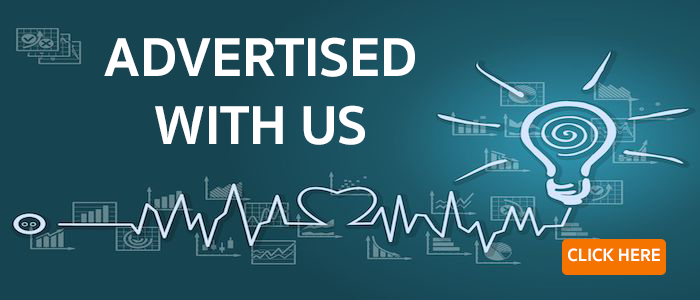
<style>
.page{position:relative;width:700px;height:300px;background:#164451}
.page>*{position:absolute;margin:0}
.t1{font:56px "SukhumvitSet-Bold";color:#ffffff}
.t2{font:18px "SukhumvitSet-Bold";color:#ffffff}
</style>
<div class="page">
<p class="t1" style="left:104px;top:37px;width:311px;height:108px;text-align:center">ADVERTISED<br>WITH US</p>
<p class="t2" style="left:568px;top:248px;width:92px;height:14px">CLICK HERE</p>
</div>
